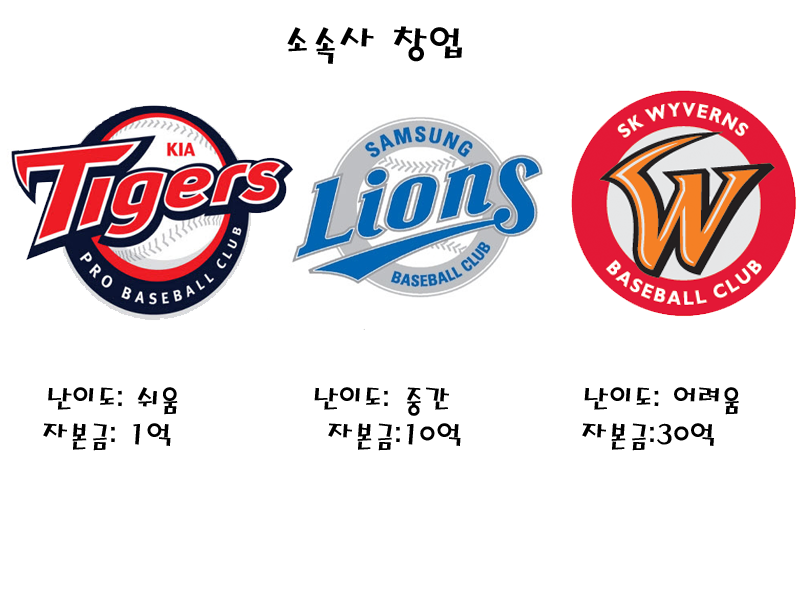
<style>
.page{position:relative;width:800px;height:600px;background:#ffffff}
.page>*{position:absolute;margin:0}
.t1{font:41px "MagicR-HM";color:#000000}
.t2{font:30px "MagicR-HM";color:#000000}
</style>
<div class="page">
<p class="t1" style="left:287px;top:26px;width:175px;height:38px">소속사 창업</p>
<p class="t2" style="left:43px;top:387px;width:696px;height:64px"><span class="t1"> <br> </span>난이도: 쉬움           난이도: 중간           난이도: 어려움<br> 자본금: 1억             자본금:10억          자본금:30억</p>
</div>
